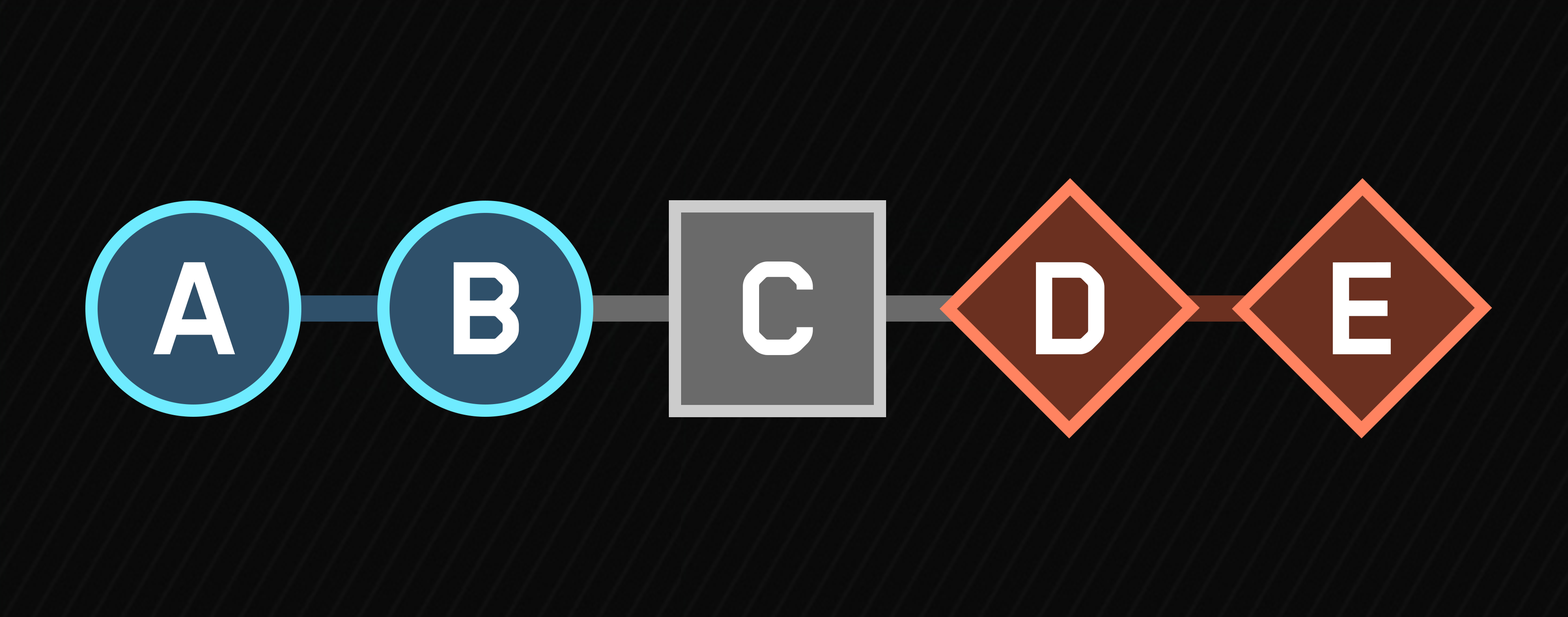
<style>
.page{position:relative;width:1568px;height:617px;background:#0a0a0a}
.page>*{position:absolute;margin:0}
.t1{font:153.7px "BF_SUB_HEADLINE_BOLD";color:#ffffff}
</style>
<div class="page">
<p class="t1" style="left:153px;top:262px;width:82px;height:92px">A</p>
<p class="t1" style="left:454px;top:262px;width:65px;height:92px">B</p>
<p class="t1" style="left:743px;top:261px;width:70px;height:94px">C</p>
<p class="t1" style="left:1036px;top:262px;width:69px;height:92px">D</p>
<p class="t1" style="left:1333px;top:262px;width:58px;height:92px">E</p>
</div>
